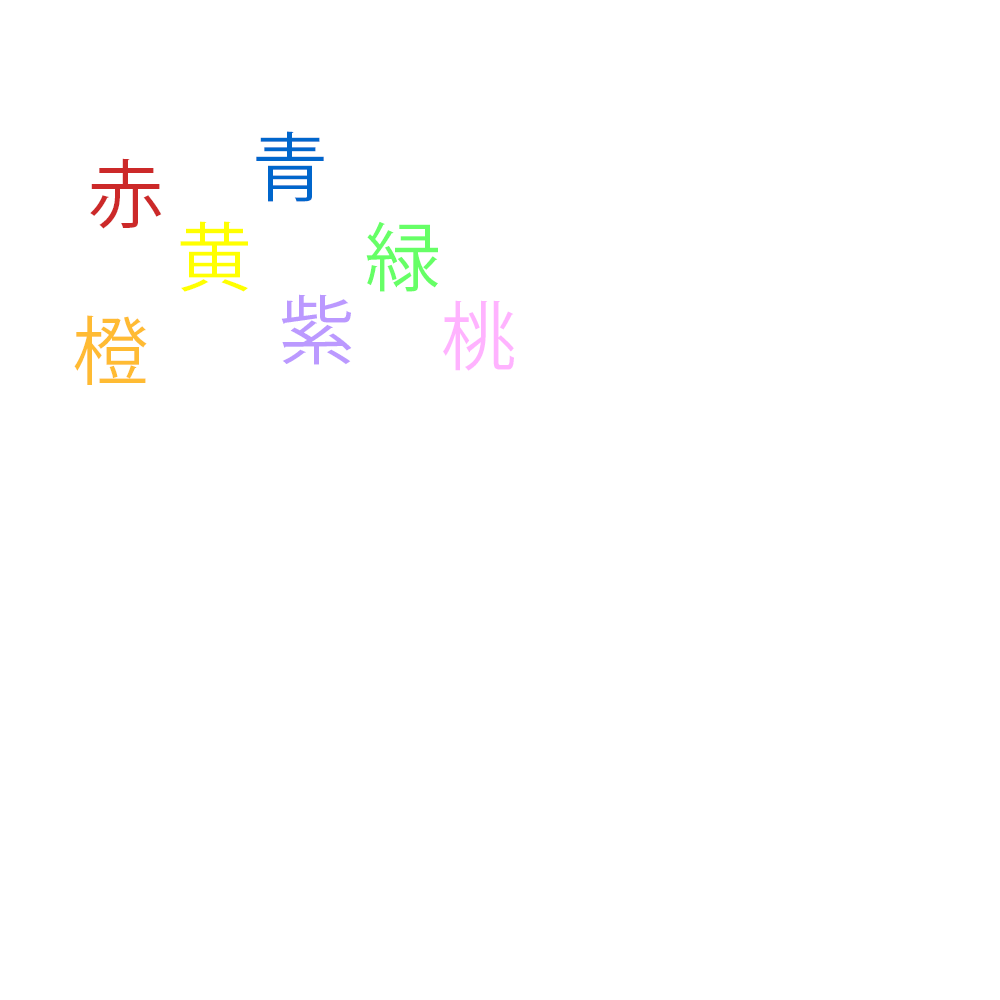
<style>
.page{position:relative;width:1000px;height:1000px;background:#ffffff}
.page>*{position:absolute;margin:0}
.t1{font:75px "KozGoPr6N-Regular";color:#0066cc}
.t2{font:75px "KozGoPr6N-Regular";color:#cc2929}
.t3{font:75px "KozGoPr6N-Regular";color:#ffff00}
.t4{font:75px "KozGoPr6N-Regular";color:#66ff66}
.t5{font:75px "KozGoPr6N-Regular";color:#bb99ff}
.t6{font:75px "KozGoPr6N-Regular";color:#ffb3ff}
.t7{font:75px "KozGoPr6N-Regular";color:#ffbb33}
</style>
<div class="page">
<p class="t1" style="left:256px;top:131px;width:68px;height:71px">青</p>
<p class="t2" style="left:90px;top:158px;width:72px;height:71px">赤</p>
<p class="t3" style="left:180px;top:221px;width:68px;height:71px">黄</p>
<p class="t4" style="left:366px;top:221px;width:72px;height:71px">緑</p>
<p class="t5" style="left:281px;top:294px;width:71px;height:71px">紫</p>
<p class="t6" style="left:443px;top:300px;width:71px;height:71px">桃</p>
<p class="t7" style="left:74px;top:315px;width:73px;height:70px">橙</p>
</div>
